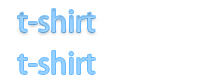
<style>
.page{position:relative;width:203px;height:84px;background:#ffffff}
.page>*{position:absolute;margin:0}
.t1{font:31.5px "MyriadPro-Regular";color:#98d1ff}
</style>
<div class="page">
<p class="t1" style="left:18px;top:9px;width:77px;height:23px">t-shirt</p>
</div>
